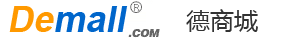
<style>
.page{position:relative;width:281px;height:41px;background:#ffffff}
.page>*{position:absolute;margin:0}
.t1{font:36px "Arial-BoldMT";color:#0066cb;font-style:italic}
.t2{font:36px "Arial-BoldMT";color:#ff9900;font-style:italic}
.t3{font:24px "MicrosoftYaHei";color:#333333}
</style>
<div class="page">
<p class="t1" style="left:9px;top:6px;width:119px;height:26px"><span class="t2">De</span>mall</p>
<p class="t3" style="left:186px;top:9px;width:72px;height:23px">德商城</p>
</div>
